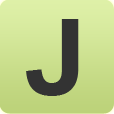
<style>
.page{position:relative;width:114px;height:114px}
.page>*{position:absolute;margin:0}
.t1{font:100px "BMWTypeV2Regular-Bold";color:#333333}
</style>
<div class="page">
<p class="t1" style="left:26px;top:19px;width:53px;height:77px">J</p>
</div>
